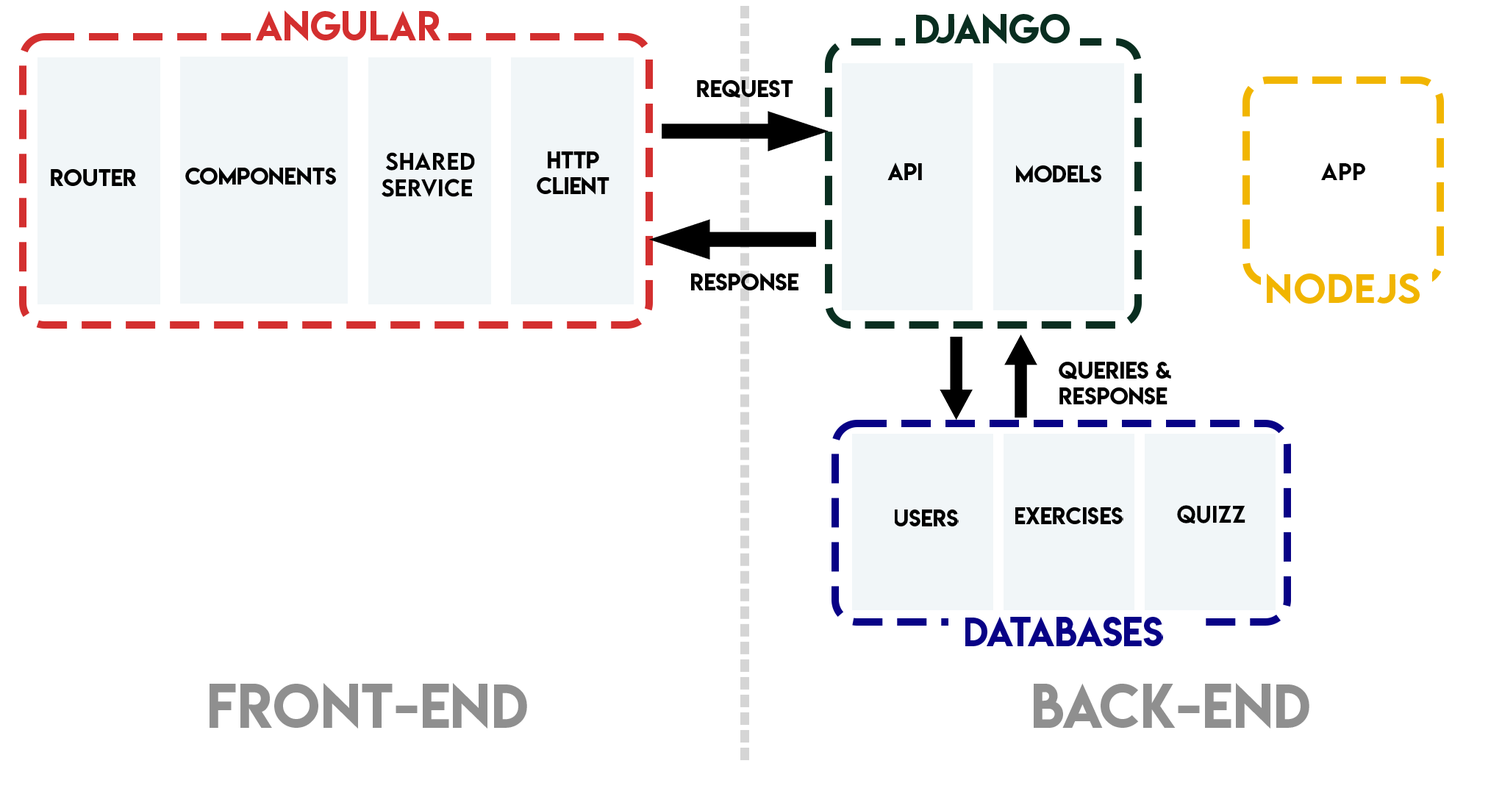
<style>
.page{position:relative;width:1502px;height:794px;background:#ffffff}
.page>*{position:absolute;margin:0}
.t1{font:36.8px "LemonMilk";letter-spacing:0.01em;color:#d32f2f}
.t2{font:36.8px "LemonMilk";letter-spacing:0.01em;color:#092e20}
.t3{font:21.4px "LemonMilk";letter-spacing:0.01em;color:#000000}
.t4{font:21.4px "LEMONMILK-Medium";letter-spacing:0.01em;color:#000000}
.t5{font:21.4px "LemonMilk";color:#000000}
.t6{font:36.8px "LEMONMILK-Medium";letter-spacing:0.01em;color:#f1b500}
.t7{font:36.8px "LemonMilk";letter-spacing:0.01em;color:#080286}
.t8{font:55.1px "LemonMilk";letter-spacing:0.01em;color:#8f8f8f}
</style>
<div class="page">
<p class="t1" style="left:256px;top:10px;width:184px;height:31px">Angular</p>
<p class="t2" style="left:916px;top:13px;width:154px;height:31px">DJANGO</p>
<p class="t3" style="left:697px;top:80px;width:96px;height:18px">REQUEST</p>
<p class="t4" style="left:385px;top:152px;width:90px;height:19px">sHARED</p>
<p class="t5" style="left:537px;top:151px;width:72px;height:44px;text-align:center">HTtp<br>client</p>
<p class="t3" style="left:51px;top:169px;width:85px;height:17px">ROUTER</p>
<p class="t3" style="left:185px;top:167px;width:151px;height:18px">Components</p>
<p class="t3" style="left:887px;top:162px;width:35px;height:18px">api</p>
<p class="t3" style="left:1016px;top:165px;width:85px;height:17px">models</p>
<p class="t4" style="left:1321px;top:162px;width:44px;height:18px">App</p>
<p class="t4" style="left:382px;top:179px;width:90px;height:18px">Service</p>
<p class="t3" style="left:691px;top:273px;width:107px;height:18px">RESPONSE</p>
<p class="t6" style="left:1267px;top:273px;width:153px;height:31px">nodejs</p>
<p class="t3" style="left:895px;top:509px;width:64px;height:17px">USERS</p>
<p class="t3" style="left:1015px;top:507px;width:108px;height:17px">EXERCISES</p>
<p class="t4" style="left:1177px;top:505px;width:68px;height:19px">QUIZZ</p>
<p class="t7" style="left:965px;top:616px;width:198px;height:30px">DATABASES</p>
<p class="t8" style="left:210px;top:683px;width:317px;height:46px">front-end</p>
<p class="t8" style="left:1034px;top:683px;width:275px;height:46px">BACK-end</p>
</div>
